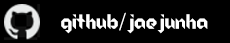
<style>
.page{position:relative;width:230px;height:43px;background:#000000}
.page>*{position:absolute;margin:0}
.t1{font:20px "Origram";color:#ffffff}
.t2{font:20px "Gulim";color:#ffffff}
</style>
<div class="page">
<p class="t1" style="left:61px;top:12px;width:147px;height:22px">Github<span class="t2">/</span>jaejunha</p>
</div>
